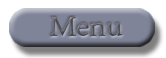
<style>
.page{position:relative;width:166px;height:58px;background:#ffffff}
.page>*{position:absolute;margin:0}
.t1{font:31.2px "AdobeDevanagari-Regular";color:#525151;scale:1.08 1}
</style>
<div class="page">
<p class="t1" style="left:50px;top:17px;width:73px;height:19px">Menu</p>
</div>
